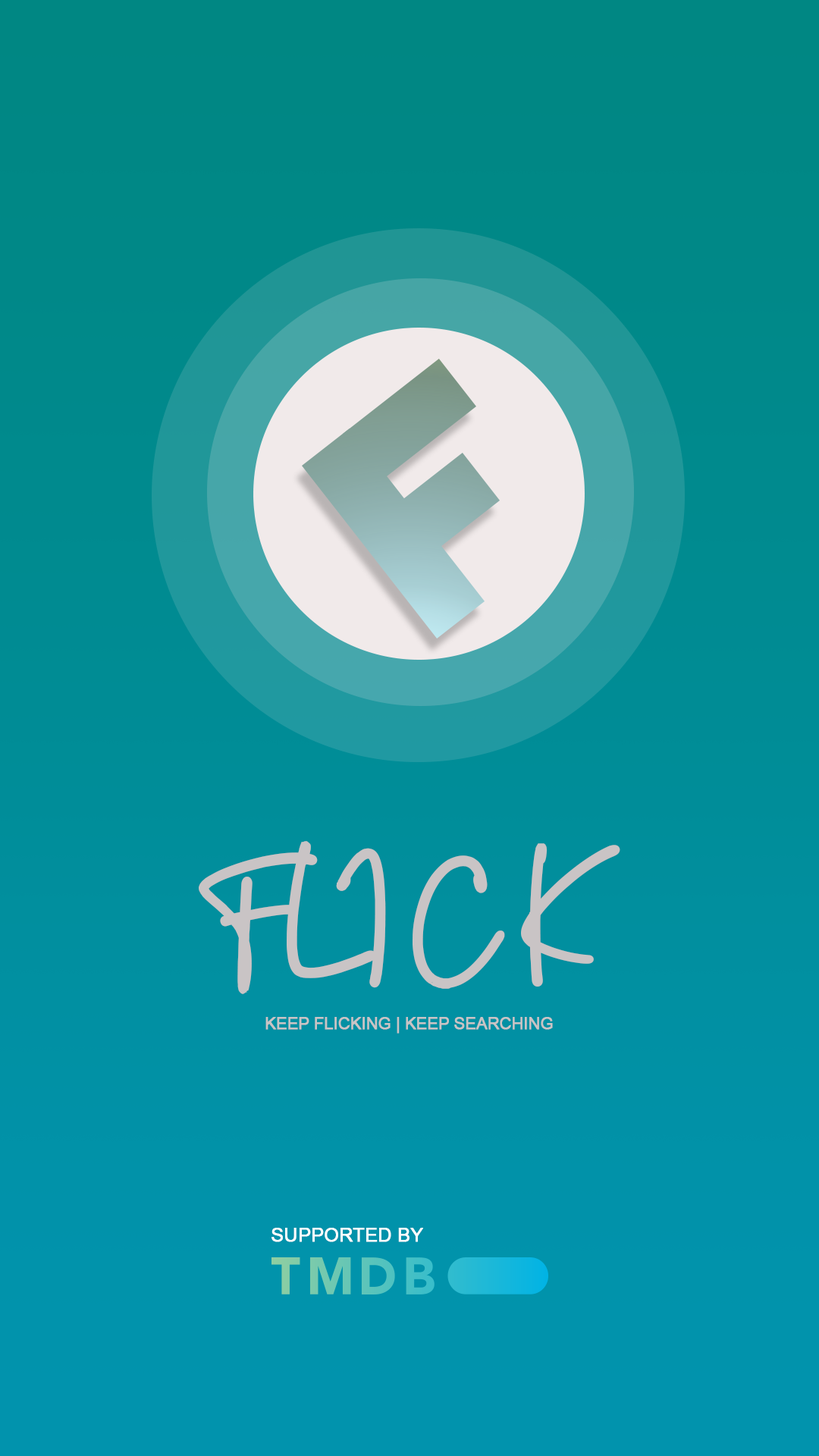
<style>
.page{position:relative;width:819px;height:1456px}
.page>*{position:absolute;margin:0}
.t1{font:194.6px "JustSunday";letter-spacing:0.1em;color:#c9c4c5;text-transform:uppercase;font-weight:bold}
.t2{font:16.5px "ArialMT";letter-spacing:-0.02em;color:#c9c4c5;text-transform:uppercase;font-weight:bold}
.t3{font:19.3px "ArialMT";letter-spacing:-0.02em;color:#ffffff;text-transform:uppercase;font-weight:bold}
</style>
<div class="page">
<p class="t1" style="left:199px;top:841px;width:421px;height:153px">FLICK</p>
<p class="t2" style="left:265px;top:1017px;width:288px;height:17px">keep Flicking | KEEP SEARCHING</p>
<p class="t3" style="left:271px;top:1228px;width:152px;height:14px">Supported by</p>
</div>
